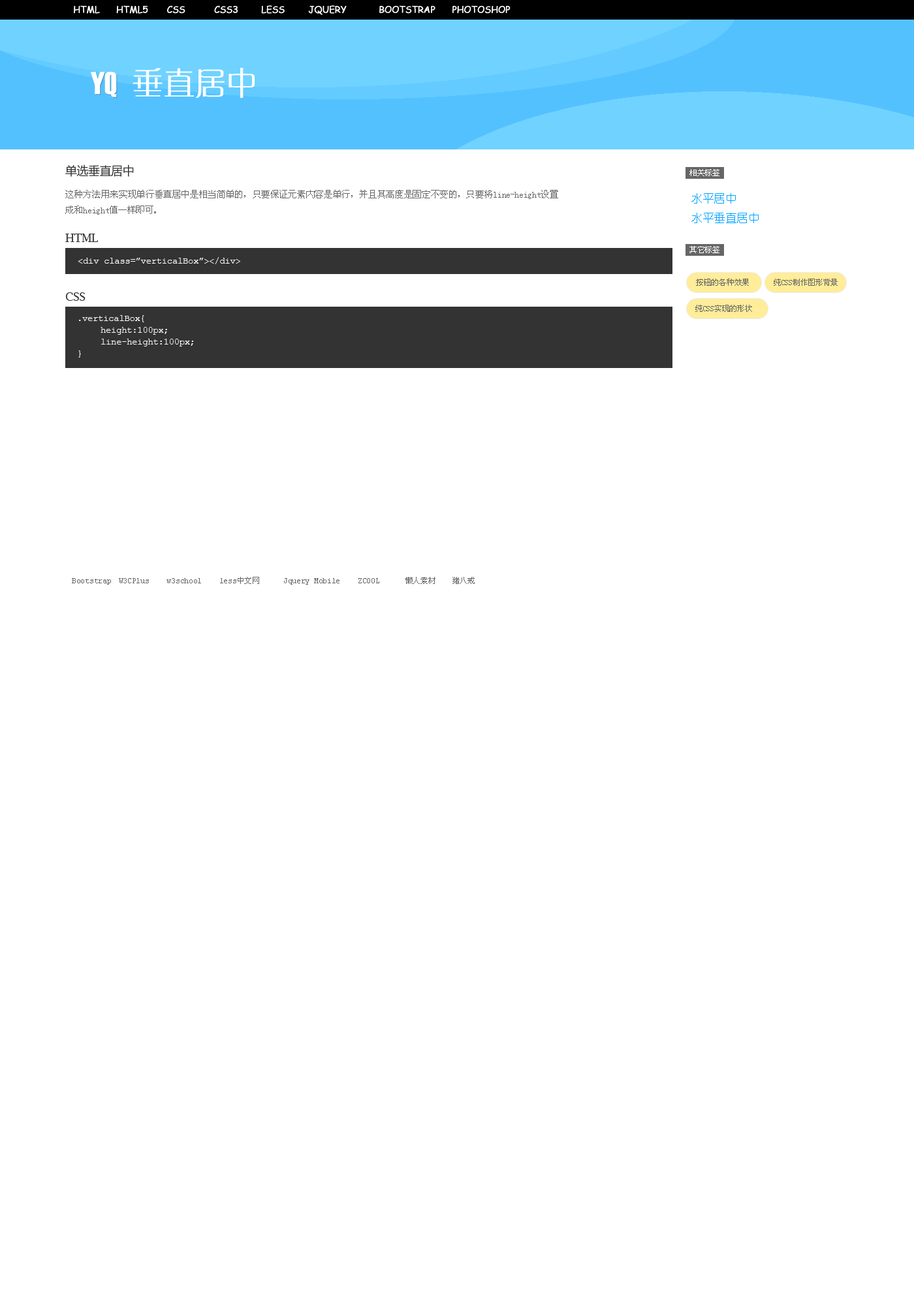
<style>
.page{position:relative;width:914px;height:1305px;background:#ffffff}
.page>*{position:absolute;margin:0}
.t1{font:9.1px "ComicSansMS";letter-spacing:-0.025em;color:#fffefe;font-weight:bold}
.t2{font:31.3px "Haettenschweiler";letter-spacing:-0.025em;color:#ffffff;font-weight:bold}
.t3{font:31.3px "GJJZQJW--GB1-0";letter-spacing:-0.025em;color:#ffffff;font-weight:bold}
.t4{font:11.7px "MicrosoftYaHei";letter-spacing:-0.025em;color:#333333}
.t5{font:7.8px "SimSun";letter-spacing:-0.025em;color:#ffffff}
.t6{font:9.1px/15.7px "SimSun";letter-spacing:-0.025em;color:#666666}
.t7{font:11.7px/19.6px "YouYuan";letter-spacing:-0.025em;color:#00a3ff}
.t8{font:11.7px "LucidaBright";letter-spacing:-0.025em;color:#333333}
.t9{font:9.1px "CourierNewPSMT";letter-spacing:-0.025em;color:#ffffff}
.t10{font:7.8px "SimSun";letter-spacing:-0.025em;color:#666666}
.t11{font:9.1px/11.7px "CourierNewPSMT";letter-spacing:-0.025em;color:#ffffff}
.t12{font:7.8px "CourierNewPSMT";letter-spacing:-0.025em;color:#666666}
</style>
<div class="page">
<p class="t1" style="left:74px;top:5px;width:436px;height:10px">HTML      HTML5   CSS   CSS3    LESS   JQUERY     BOOTSTRAP   PHOTOSHOP</p>
<p class="t2" style="left:91px;top:72px;width:26px;height:25px">YQ</p>
<p class="t3" style="left:132px;top:68px;width:123px;height:30px">垂直居中</p>
<p class="t4" style="left:65px;top:164px;width:69px;height:13px">单选垂直居中</p>
<p class="t5" style="left:689px;top:169px;width:30px;height:7px">相关标签</p>
<p class="t6" style="left:65px;top:190px;width:493px;height:25px">这种方法用来实现单行垂直居中是相当简单的，只要保证元素内容是单行，并且其高度是固定不变的，只要将line-height设置<br>成和height值一样即可。</p>
<p class="t7" style="left:691px;top:193px;width:67px;height:30px">水平居中<br>水平垂直居中</p>
<p class="t8" style="left:65px;top:234px;width:33px;height:8px">HTML</p>
<p class="t9" style="left:78px;top:257px;width:163px;height:7px">&lt;div class=”verticalBox”&gt;&lt;/div&gt;</p>
<p class="t5" style="left:689px;top:246px;width:30px;height:7px">其它标签</p>
<p class="t10" style="left:696px;top:279px;width:53px;height:7px">按钮的各种效果</p>
<p class="t10" style="left:773px;top:279px;width:64px;height:7px">纯CSS制作图形背景</p>
<p class="t8" style="left:65px;top:292px;width:20px;height:9px">CSS</p>
<p class="t10" style="left:695px;top:305px;width:57px;height:7px">纯CSS实现的形状</p>
<p class="t11" style="left:78px;top:315px;width:116px;height:43px">.verticalBox{<br> height:100px;<br> line-height:100px;<br>}</p>
<p class="t12" style="left:72px;top:577px;width:402px;height:8px">Bootstrap  W3CPlus    w3school    less<span class="t10">中文网</span>  Jquery Mobile    ZCOOL   <span class="t10">懒人素材   猪八戒</span></p>
</div>
